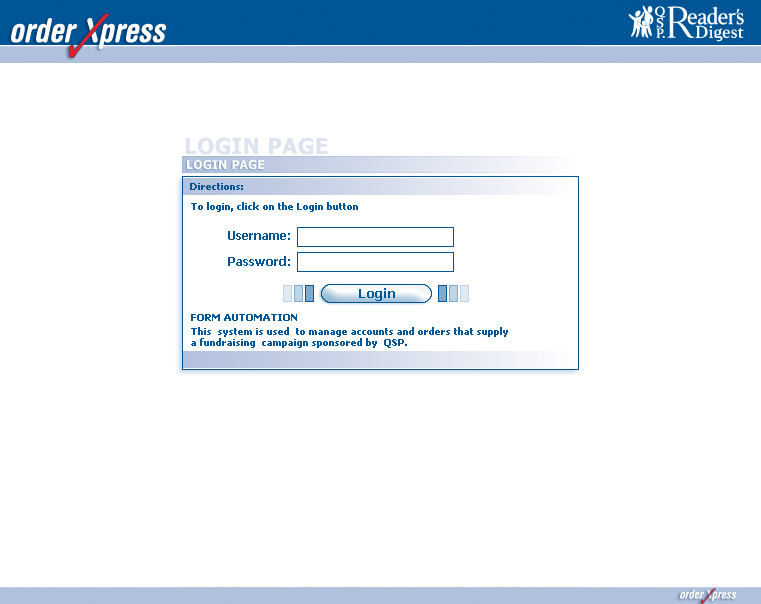
<style>
.page{position:relative;width:761px;height:604px;background:#ffffff}
.page>*{position:absolute;margin:0}
.t1{font:22px "Tahoma-Bold";letter-spacing:0.025em;color:#dde4f0}
.t2{font:12px "Tahoma-Bold";letter-spacing:0.025em;color:#ffffff}
.t3{font:10px "Tahoma-Bold";color:#005596}
.t4{font:12px "Tahoma-Bold";color:#005596}
.t5{font:13px "Tahoma-Bold";letter-spacing:0.05em;color:#005596}
.t6{font:10px/14px "Tahoma-Bold";color:#005596}
.t7{font:10px/11px "Tahoma-Bold";color:#005596}
</style>
<div class="page">
<p class="t1" style="left:185px;top:137px;width:143px;height:18px">LOGIN PAGE</p>
<p class="t2" style="left:187px;top:160px;width:78px;height:10px">LOGIN PAGE</p>
<p class="t3" style="left:190px;top:183px;width:53px;height:7px">Directions:</p>
<p class="t3" style="left:191px;top:202px;width:167px;height:10px">To login, click on the Login button</p>
<p class="t4" style="left:228px;top:231px;width:62px;height:9px">Username:</p>
<p class="t4" style="left:228px;top:256px;width:62px;height:10px">Password:</p>
<p class="t5" style="left:359px;top:288px;width:36px;height:13px">Login</p>
<p class="t6" style="left:191px;top:314px;width:317px;height:34px"><span class="t7">FORM AUTOMATION<br></span>This  system is used  to manage accounts and orders that supply<br><span class="t7">a fundraising  campaign sponsored by  QSP.</span></p>
</div>
